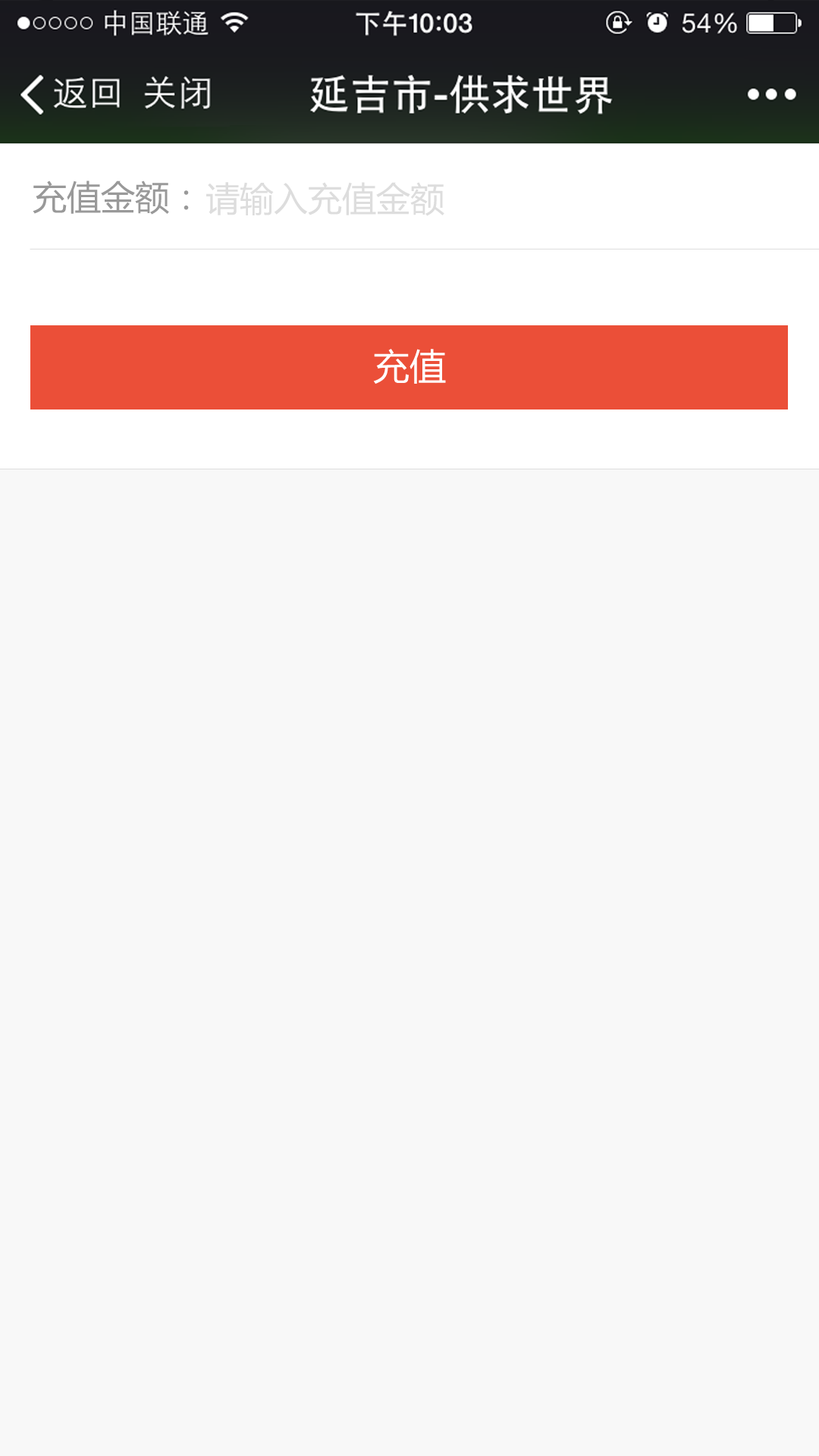
<style>
.page{position:relative;width:819px;height:1456px;background:#f8f8f8}
.page>*{position:absolute;margin:0}
.t1{font:34.1px "MicrosoftYaHei";color:#999999}
.t2{font:34.1px "MicrosoftYaHei";color:#dddddd}
.t3{font:36.4px "MicrosoftYaHei";color:#ffffff}
</style>
<div class="page">
<p class="t1" style="left:33px;top:180px;width:156px;height:35px">充值金额：</p>
<p class="t2" style="left:206px;top:182px;width:238px;height:34px">请输入充值金额</p>
<p class="t3" style="left:373px;top:349px;width:73px;height:35px">充值</p>
</div>
